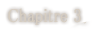
<style>
.page{position:relative;width:104px;height:31px;background:#ffffff}
.page>*{position:absolute;margin:0}
.t1{font:19px "MS-PMincho";color:#d6cdc1;font-weight:bold;scale:0.84 1}
</style>
<div class="page">
<p class="t1" style="left:8px;top:8px;width:73px;height:17px">Chapitre 3</p>
</div>
